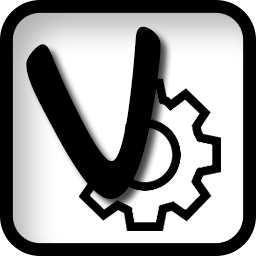
<style>
.page{position:relative;width:256px;height:256px;background:#000000}
.page>*{position:absolute;margin:0}
.t1{font:331.9px "GochiHand-Regular";color:#000000;scale:0.76 1}
</style>
<div class="page">
<p class="t1" style="left:26px;top:26px;width:135px;height:174px">V</p>
</div>
